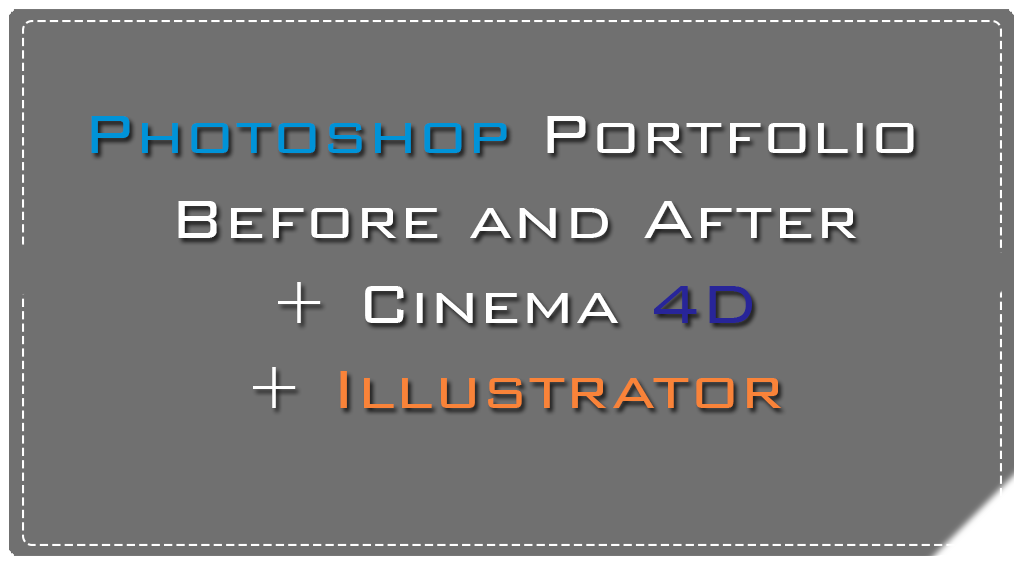
<style>
.page{position:relative;width:1024px;height:566px;background:#707070}
.page>*{position:absolute;margin:0}
.t1{font:70.8px "BankGothicBT-Light";color:#ffffff}
.t2{font:70.8px "BankGothicBT-Light";color:#0093d8}
.t3{font:70.8px "BankGothicBT-Light";color:#282599}
.t4{font:70.8px "BankGothicBT-Light";color:#f98339}
</style>
<div class="page">
<p class="t1" style="left:91px;top:116px;width:823px;height:292px;text-align:center"><span class="t2">Photoshop </span>Portfolio <br>Before and After<br>+ Cinema <span class="t3">4D<br></span>+ <span class="t4">Illustrator</span></p>
</div>
